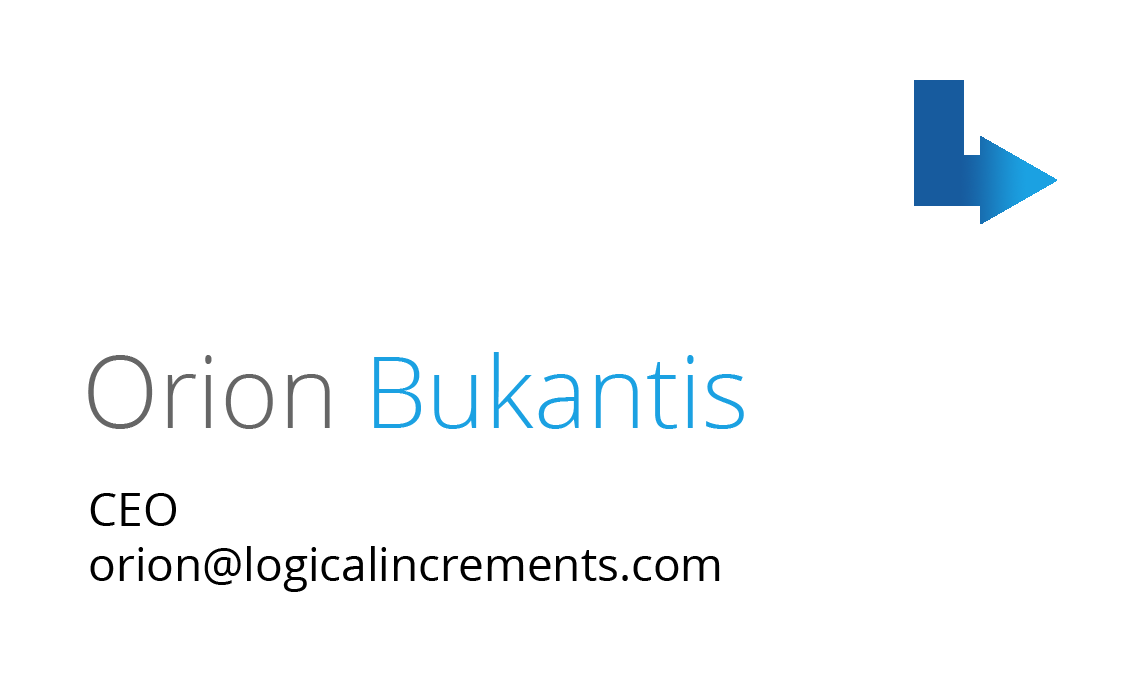
<style>
.page{position:relative;width:1125px;height:675px;background:#ffffff}
.page>*{position:absolute;margin:0}
.t1{font:100px "OpenSans-Light";color:#1ba1e2}
.t2{font:100px "OpenSans-Light";color:#666666}
.t3{font:45.8px "OpenSans";color:#000000}
</style>
<div class="page">
<p class="t1" style="left:88px;top:352px;width:656px;height:77px"><span class="t2">Orion </span>Bukantis</p>
<p class="t3" style="left:90px;top:493px;width:630px;height:99px">CEO<br>orion@logicalincrements.com</p>
</div>
